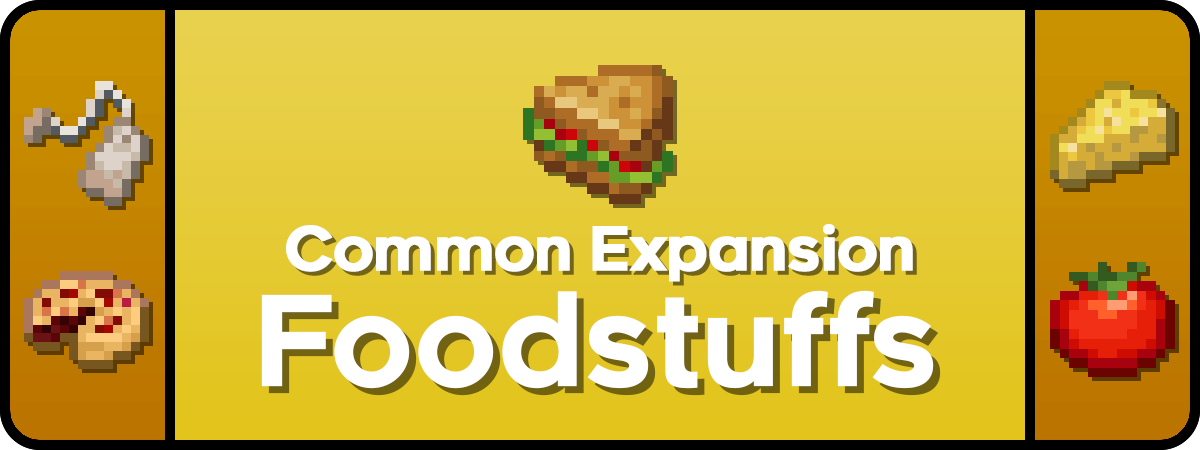
<style>
.page{position:relative;width:1200px;height:450px}
.page>*{position:absolute;margin:0}
.t1{font:60px "Renogare-Regular";letter-spacing:-0.05em;color:#ffffff;font-weight:bold}
.t2{font:125px "Renogare-Regular";letter-spacing:-0.05em;color:#ffffff;font-weight:bold}
</style>
<div class="page">
<p class="t1" style="left:286px;top:224px;width:627px;height:58px">Common Expansion</p>
<p class="t2" style="left:261px;top:290px;width:673px;height:99px">Foodstuffs</p>
</div>
